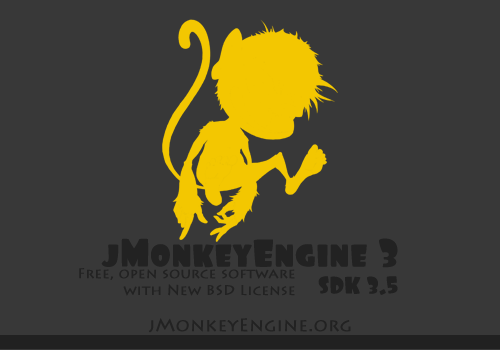
<style>
.page{position:relative;width:500px;height:350px;background:#383838}
.page>*{position:absolute;margin:0}
.t1{font:40px "Foo-Regular";color:#222222}
.t2{font:14px "LithosPro-Regular";color:#222222;font-weight:bold}
.t3{font:24px "Foo-Regular";color:#212121}
.t4{font:18px "LithosPro-Regular";color:#222222;font-weight:bold}
</style>
<div class="page">
<p class="t1" style="left:101px;top:238px;width:297px;height:30px">jMonkeyEngine 3</p>
<p class="t2" style="left:79px;top:268px;width:216px;height:28px;text-align:right">Free, open source software <br>with New BSD License</p>
<p class="t3" style="left:318px;top:276px;width:80px;height:19px">SDK 3.5</p>
<p class="t4" style="left:148px;top:318px;width:203px;height:15px">jMonkeyEngine.org</p>
</div>
